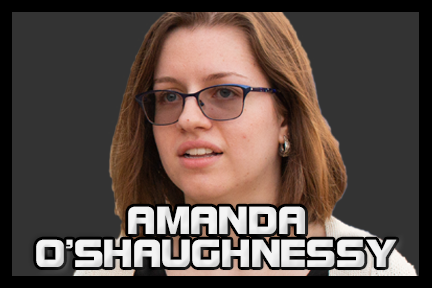
<style>
.page{position:relative;width:432px;height:288px;background:#333333}
.page>*{position:absolute;margin:0}
.t1{font:41.7px/33.3px "BolsterBold";color:#f3f3f3}
</style>
<div class="page">
<p class="t1" style="left:36px;top:206px;width:361px;height:61px;text-align:center">AMANDA<br>O’SHAUGHNESSY</p>
</div>
